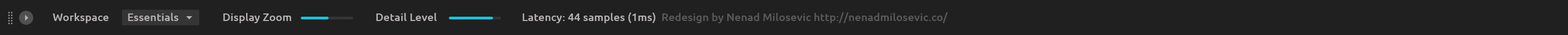
<style>
.page{position:relative;width:1568px;height:35px;background:#202020}
.page>*{position:absolute;margin:0}
.t1{font:10.9px "Ubuntu-Medium";letter-spacing:0.01em;color:#b5b2b1}
.t2{font:10.9px "Ubuntu-Medium";letter-spacing:0.01em;color:#5a5a5a}
</style>
<div class="page">
<p class="t1" style="left:53px;top:13px;width:56px;height:10px">Workspace</p>
<p class="t1" style="left:128px;top:13px;width:51px;height:8px">Essentials</p>
<p class="t1" style="left:223px;top:13px;width:68px;height:10px">Display Zoom</p>
<p class="t1" style="left:376px;top:13px;width:61px;height:8px">Detail Level</p>
<p class="t2" style="left:523px;top:13px;width:425px;height:10px"><span class="t1">Latency: 44 samples (1ms)</span>  Redesign by Nenad Milosevic http://nenadmilosevic.co/</p>
</div>
